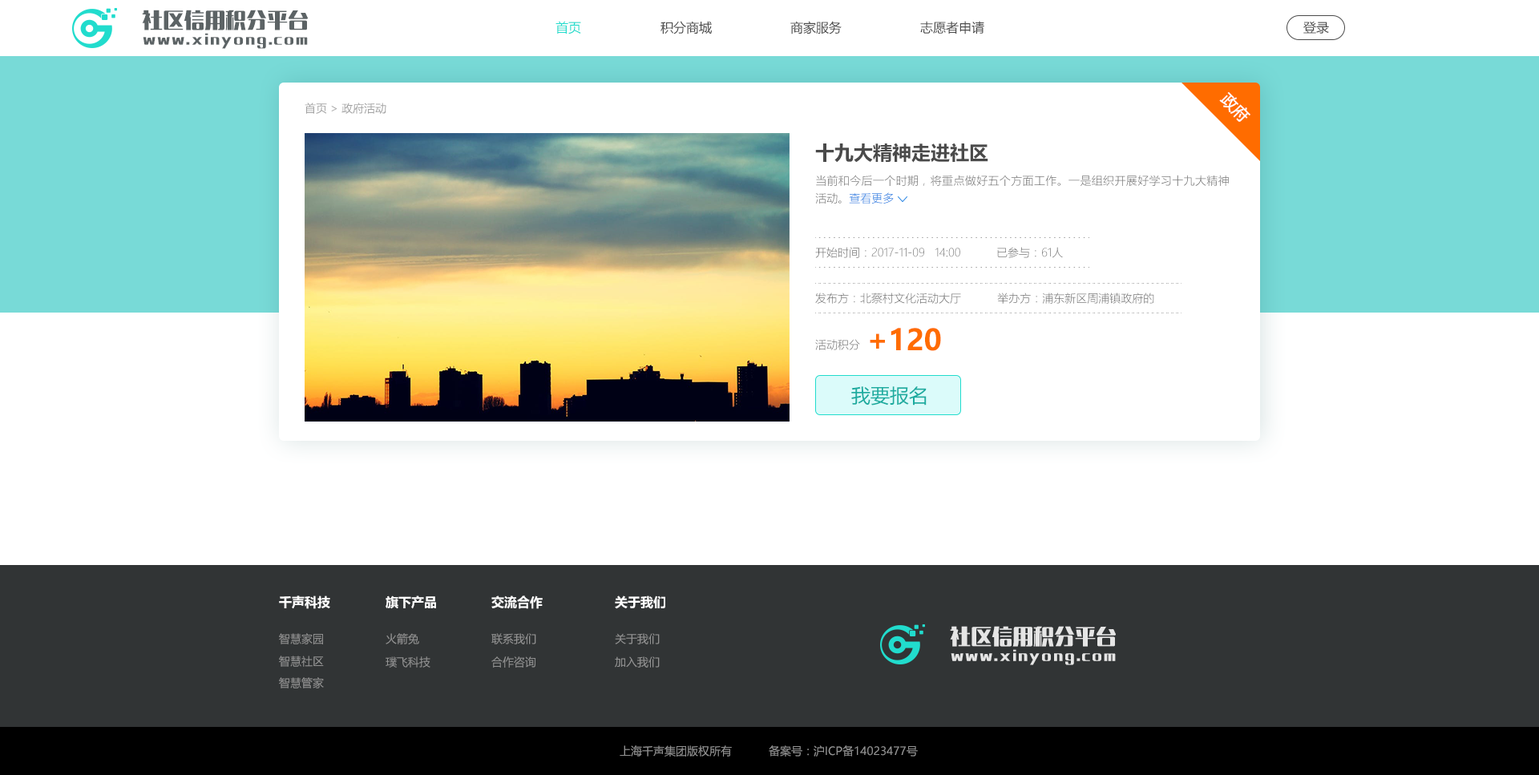
<style>
.page{position:relative;width:1539px;height:775px;background:#ffffff}
.page>*{position:absolute;margin:0}
.t1{font:20.8px "MFLangQian_Noncommercial-Bold";color:#5c6365}
.t2{font:12.8px "MicrosoftYaHei";color:#21dccd}
.t3{font:12.8px "MicrosoftYaHei";color:#4a4a4a}
.t4{font:12.8px "MFLangQian_Noncommercial-Bold";letter-spacing:0.12em;color:#5c6365}
.t5{font:16px "MicrosoftYaHei";color:#ffffff}
.t6{font:11.2px "MicrosoftYaHeiLight";color:#a2a2a2}
.t7{font:19.2px "MicrosoftYaHei-Bold";color:#4a4a4a}
.t8{font:11.2px/17.6px "MicrosoftYaHeiLight";color:#737373}
.t9{font:11.2px/17.6px "MicrosoftYaHeiLight";color:#167be2}
.t10{font:11.2px "MicrosoftYaHeiLight";color:#737373}
.t11{font:28.9px "MicrosoftYaHei-Bold";color:#ff6c00}
.t12{font:19.2px "MicrosoftYaHei";color:#1caca0}
.t13{font:12.8px "MicrosoftYaHei-Bold";color:#ffffff}
.t14{font:20.8px "MFLangQian_Noncommercial-Bold";color:#e5e5e5}
.t15{font:11.2px "MicrosoftYaHei";color:#929292}
.t16{font:12.8px "MFLangQian_Noncommercial-Bold";letter-spacing:0.12em;color:#e5e5e5}
</style>
<div class="page">
<p class="t1" style="left:142px;top:10px;width:166px;height:20px">社区信用积分平台</p>
<p class="t2" style="left:555px;top:21px;width:26px;height:13px">首页</p>
<p class="t3" style="left:660px;top:21px;width:52px;height:13px">积分商城</p>
<p class="t3" style="left:790px;top:21px;width:51px;height:13px">商家服务</p>
<p class="t3" style="left:920px;top:21px;width:64px;height:13px">志愿者申请</p>
<p class="t3" style="left:1303px;top:21px;width:26px;height:13px">登录</p>
<p class="t4" style="left:143px;top:33px;width:165px;height:16px">www.xinyong.com</p>
<p class="t5" style="left:1219px;top:92px;width:31px;height:30px;rotate:45deg">政府</p>
<p class="t6" style="left:305px;top:103px;width:81px;height:11px">首页 &gt; 政府活动</p>
<p class="t7" style="left:815px;top:143px;width:173px;height:20px">十九大精神走进社区</p>
<p class="t8" style="left:815px;top:175px;width:414px;height:29px;text-align:justify">当前和今后一个时期，将重点做好五个方面工作。一是组织开展好学习十九大精神活动。<span class="t9">查看更多</span></p>
<p class="t10" style="left:815px;top:247px;width:145px;height:11px">开始时间：2017-11-09   14:00</p>
<p class="t10" style="left:997px;top:247px;width:66px;height:11px">已参与：61人</p>
<p class="t10" style="left:815px;top:293px;width:146px;height:11px">发布方：北蔡村文化活动大厅</p>
<p class="t10" style="left:997px;top:293px;width:157px;height:11px">举办方：浦东新区周浦镇政府的</p>
<p class="t11" style="left:870px;top:328px;width:71px;height:23px">+120</p>
<p class="t10" style="left:815px;top:339px;width:45px;height:11px">活动积分</p>
<p class="t12" style="left:851px;top:386px;width:75px;height:20px">我要报名</p>
<p class="t13" style="left:279px;top:595px;width:51px;height:14px">千声科技</p>
<p class="t13" style="left:385px;top:595px;width:51px;height:14px">旗下产品</p>
<p class="t13" style="left:491px;top:595px;width:52px;height:14px">交流合作</p>
<p class="t13" style="left:615px;top:595px;width:50px;height:14px">关于我们</p>
<p class="t14" style="left:950px;top:626px;width:166px;height:21px">社区信用积分平台</p>
<p class="t15" style="left:279px;top:633px;width:44px;height:11px">智慧家园</p>
<p class="t15" style="left:385px;top:633px;width:34px;height:11px">火箭兔</p>
<p class="t15" style="left:491px;top:633px;width:45px;height:11px">联系我们</p>
<p class="t15" style="left:615px;top:633px;width:45px;height:11px">关于我们</p>
<p class="t16" style="left:950px;top:649px;width:166px;height:16px">www.xinyong.com</p>
<p class="t15" style="left:279px;top:656px;width:45px;height:11px">智慧社区</p>
<p class="t15" style="left:385px;top:656px;width:45px;height:12px">璞飞科技</p>
<p class="t15" style="left:491px;top:656px;width:45px;height:12px">合作咨询</p>
<p class="t15" style="left:615px;top:656px;width:45px;height:12px">加入我们</p>
<p class="t15" style="left:279px;top:677px;width:45px;height:11px">智慧管家</p>
<p class="t15" style="left:619px;top:745px;width:113px;height:12px">上海千声集团版权所有</p>
<p class="t15" style="left:769px;top:745px;width:149px;height:12px">备案号：沪ICP备14023477号</p>
</div>
